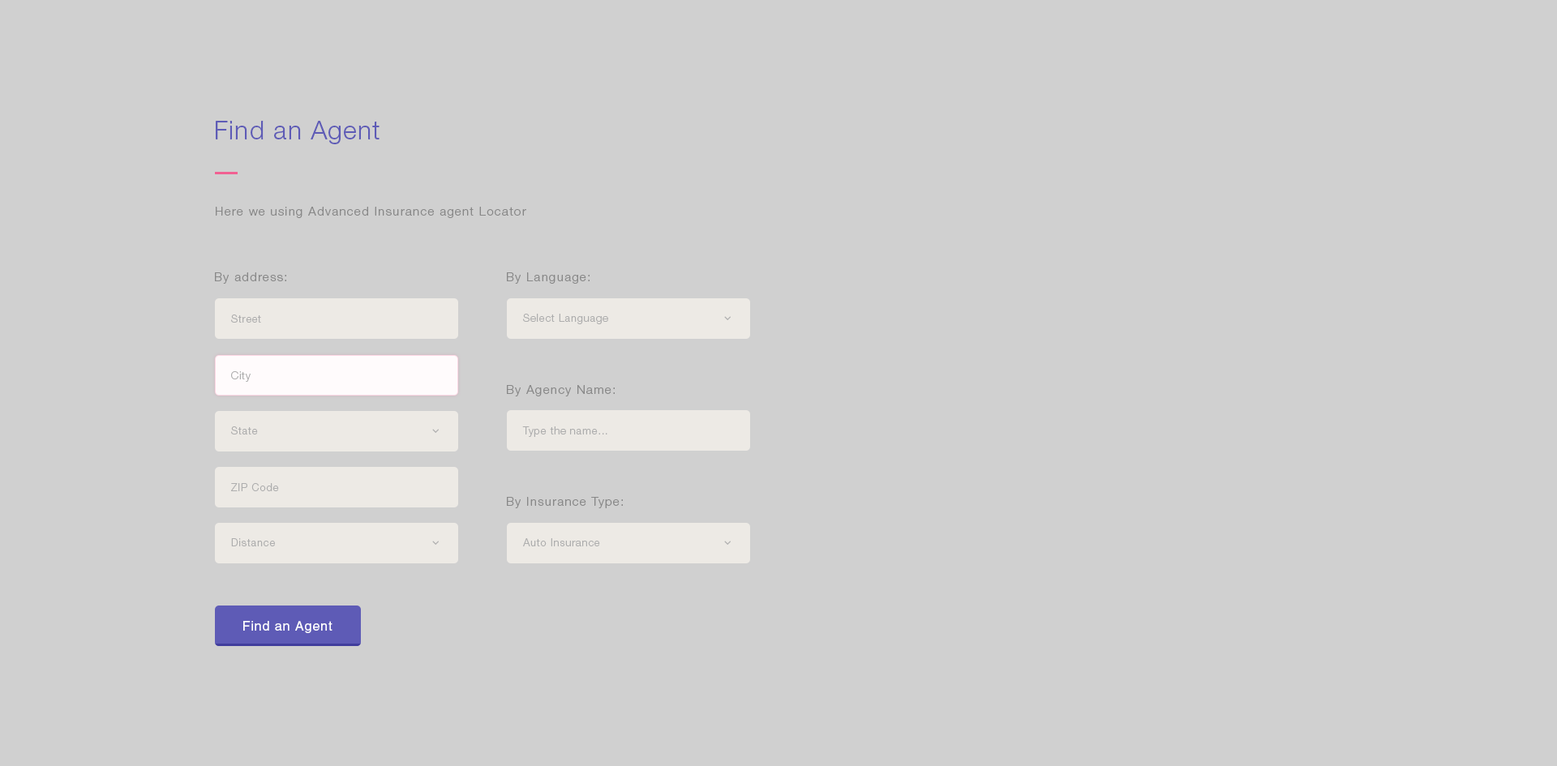
<style>
.page{position:relative;width:1557px;height:766px;background:#d0d0d0}
.page>*{position:absolute;margin:0}
.t1{font:25.9px "HelveticaNeueLTStd-Lt";letter-spacing:0.035em;color:#5e5bb6}
.t2{font:12.2px "HelveticaNeueLTStd-Lt";letter-spacing:0.09em;color:#888888}
.t3{font:10.5px "HelveticaNeueLTStd-Lt";letter-spacing:0.06em;color:#aeaeae}
.t4{font:13px "Helvetica";letter-spacing:0.06em;color:#ffffff}
</style>
<div class="page">
<p class="t1" style="left:216px;top:121px;width:163px;height:23px">Find an Agent</p>
<p class="t2" style="left:216px;top:207px;width:310px;height:11px">Here we using Advanced Insurance agent Locator</p>
<p class="t2" style="left:215px;top:272px;width:71px;height:12px">By address:</p>
<p class="t2" style="left:507px;top:272px;width:82px;height:12px">By Language:</p>
<p class="t3" style="left:231px;top:315px;width:30px;height:8px">Street</p>
<p class="t3" style="left:523px;top:314px;width:85px;height:10px">Select Language</p>
<p class="t3" style="left:231px;top:371px;width:20px;height:11px">City</p>
<p class="t2" style="left:507px;top:385px;width:107px;height:11px">By Agency Name:</p>
<p class="t3" style="left:231px;top:426px;width:27px;height:9px">State</p>
<p class="t3" style="left:522px;top:426px;width:85px;height:11px">Type the name...</p>
<p class="t3" style="left:231px;top:483px;width:48px;height:8px">ZIP Code</p>
<p class="t2" style="left:507px;top:497px;width:116px;height:11px">By Insurance Type:</p>
<p class="t3" style="left:231px;top:538px;width:44px;height:8px">Distance</p>
<p class="t3" style="left:523px;top:538px;width:77px;height:8px">Auto Insurance</p>
<p class="t4" style="left:243px;top:621px;width:89px;height:12px">Find an Agent</p>
</div>
